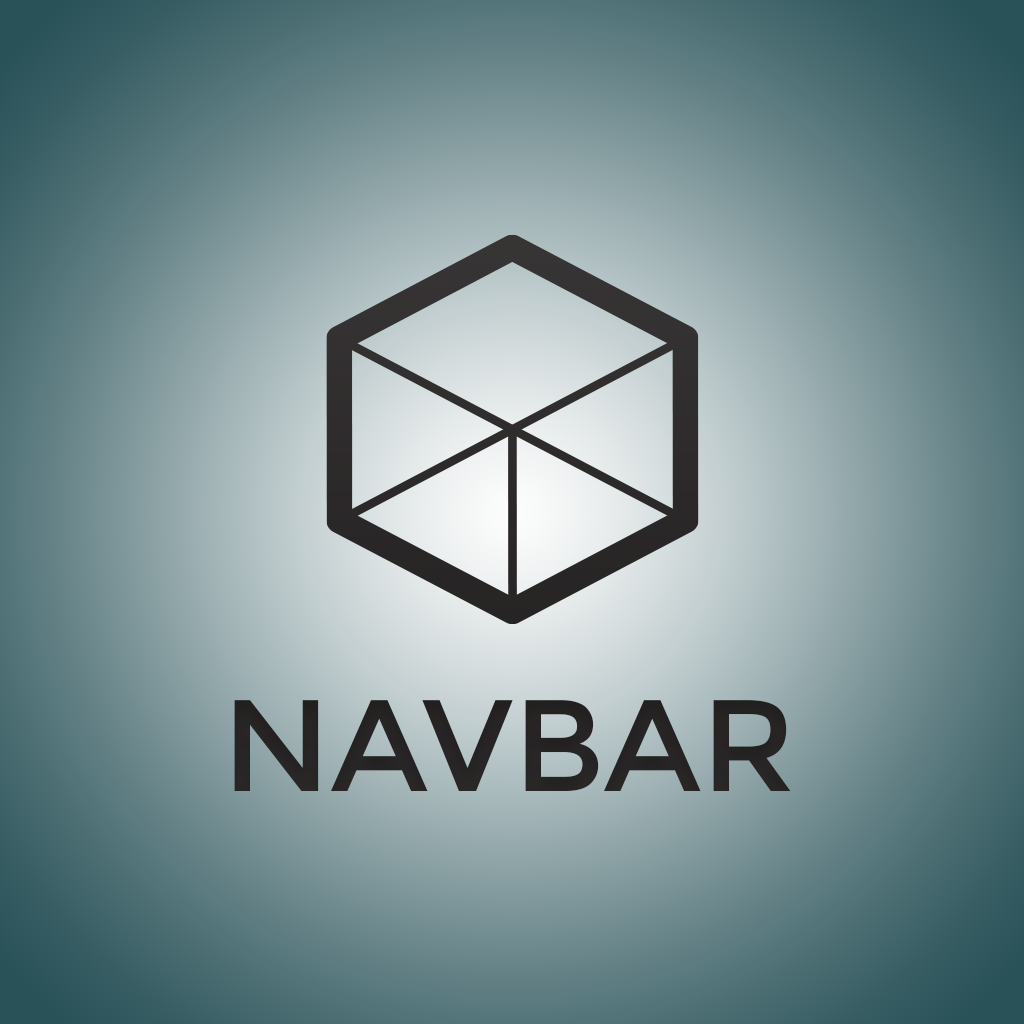
<style>
.page{position:relative;width:1024px;height:1024px}
.page>*{position:absolute;margin:0}
.t1{font:130px "Montserrat-Regular";color:#231f20}
</style>
<div class="page">
<p class="t1" style="left:234px;top:700px;width:557px;height:91px">NAVBAR</p>
</div>
